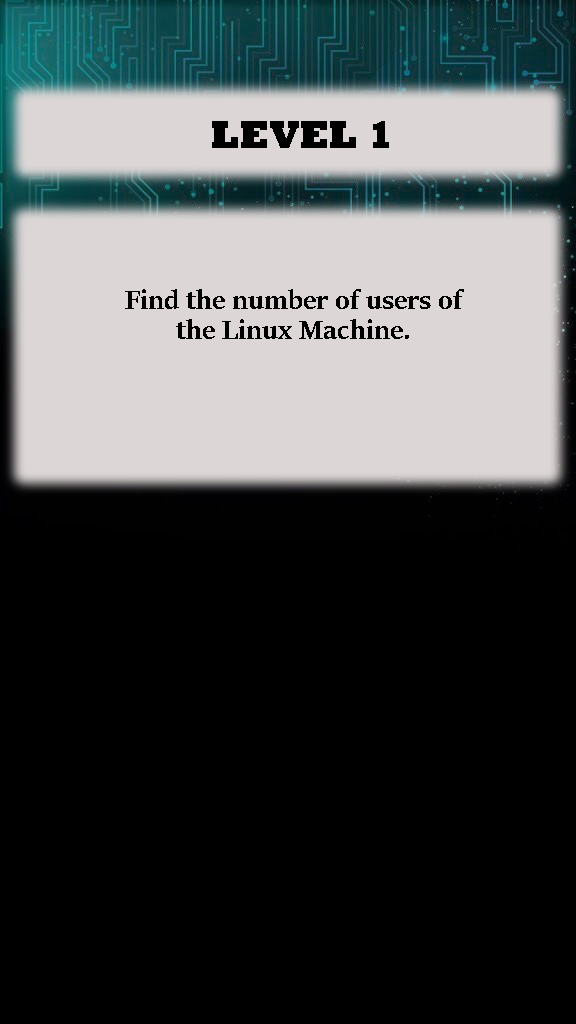
<style>
.page{position:relative;width:576px;height:1024px;background:#000000}
.page>*{position:absolute;margin:0}
.t1{font:40px "Rockwell-ExtraBold";color:#000000}
.t2{font:30px/10px "SitkaBanner-Bold";color:#000000}
</style>
<div class="page">
<p class="t1" style="left:212px;top:121px;width:177px;height:27px">LEVEL 1</p>
<p class="t2" style="left:125px;top:289px;width:339px;height:50px;text-align:center">Find the number of users of <br><br><br>the Linux Machine.</p>
</div>
